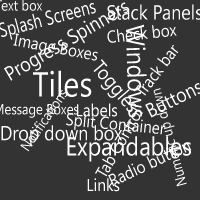
<style>
.page{position:relative;width:200px;height:200px;background:#333333}
.page>*{position:absolute;margin:0}
.t1{font:20.2px "SegoeUI";color:#ffffff;scale:0.76 1}
.t2{font:20.2px "SegoeUI";color:#ffffff;scale:0.88 1}
.t3{font:17.3px "SegoeUI";color:#ffffff;scale:0.88 1}
.t4{font:26px "SegoeUI";color:#ffffff;scale:0.88 1}
.t5{font:34.7px "SegoeUI";color:#ffffff;scale:0.88 1}
.t6{font:14.4px "SegoeUI";color:#ffffff;scale:0.88 1}
.t7{font:16.7px "SegoeUI";color:#ffffff;scale:0.92 1}
</style>
<div class="page">
<p class="t1" style="left:0px;top:3px;width:96px;height:37px;rotate:-15deg">Splash Screens</p>
<p class="t2" style="left:4px;top:2px;width:126px;height:79px;rotate:-30deg">Progress Spinners</p>
<p class="t2" style="left:107px;top:4px;width:95px;height:16px">Stack Panels</p>
<p class="t3" style="left:107px;top:25px;width:70px;height:18px;rotate:-7deg">Check box</p>
<p class="t4" style="left:126px;top:24px;width:21px;height:94px;rotate:88deg">Windows</p>
<p class="t3" style="left:13px;top:33px;width:85px;height:28px;rotate:11deg">Image Boxes</p>
<p class="t3" style="left:133px;top:45px;width:46px;height:51px;rotate:-53deg">Track bar</p>
<p class="t2" style="left:93px;top:59px;width:44px;height:53px;rotate:49deg">Toggles</p>
<p class="t5" style="left:33px;top:70px;width:59px;height:27px">Tiles</p>
<p class="t6" style="left:153px;top:88px;width:34px;height:99px;rotate:-105deg">Numeric up down</p>
<p class="t6" style="left:20px;top:90px;width:48px;height:62px;rotate:-56deg">Notifications</p>
<p class="t3" style="left:66px;top:113px;width:100px;height:22px;rotate:5deg">Split Container</p>
<p class="t3" style="left:77px;top:103px;width:40px;height:14px">Labels</p>
<p class="t7" style="left:95px;top:106px;width:48px;height:71px;rotate:-60deg">Tab Control</p>
<p class="t2" style="left:1px;top:125px;width:121px;height:20px">Drop down box</p>
<p class="t4" style="left:67px;top:136px;width:124px;height:26px">Expandables</p>
<p class="t3" style="left:108px;top:142px;width:84px;height:45px;rotate:-25deg">Radio button</p>
<p class="t3" style="left:87px;top:178px;width:33px;height:14px">Links</p>
</div>
